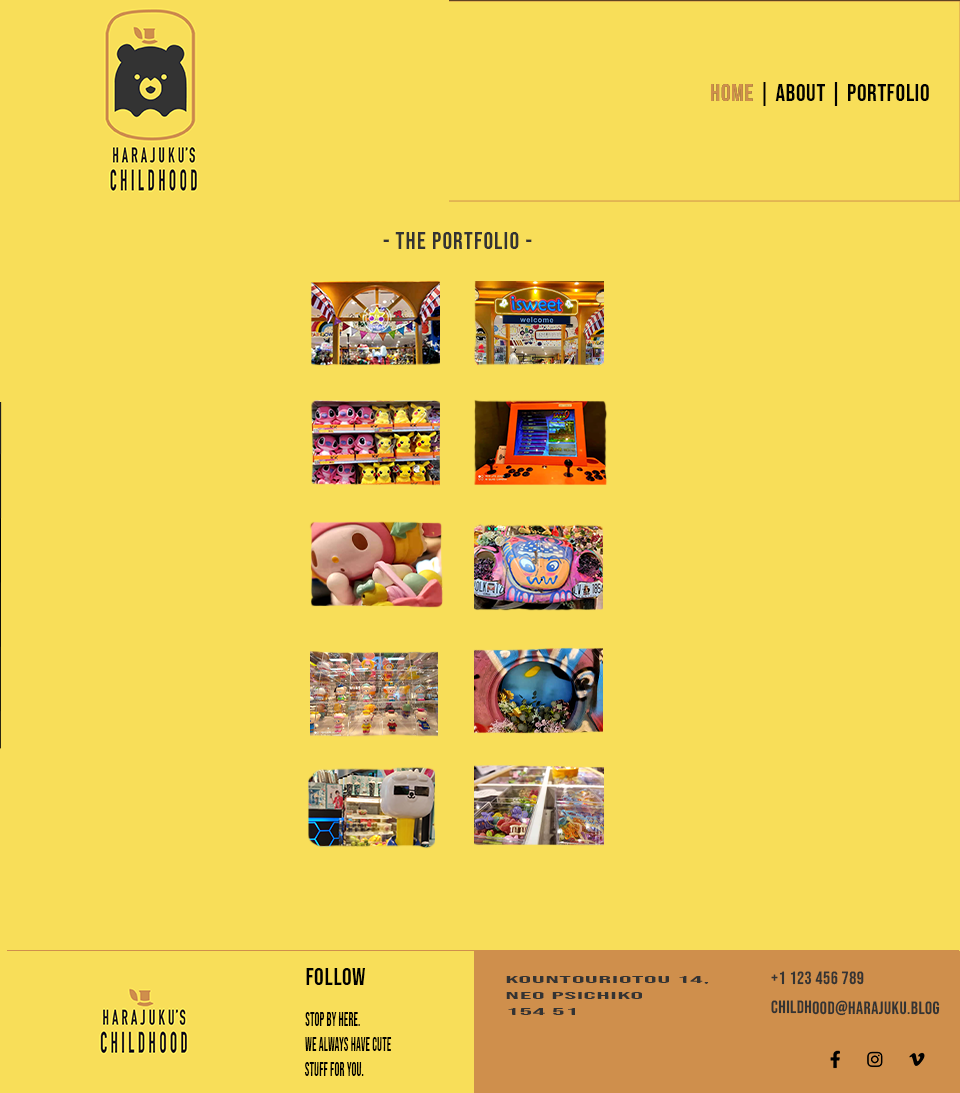
<style>
.page{position:relative;width:960px;height:1093px;background:#f8de59}
.page>*{position:absolute;margin:0}
.t1{font:24px "BebasNeue-Regular";letter-spacing:0.025em;color:#000000}
.t2{font:24px "BebasNeue-Regular";letter-spacing:0.025em;color:#cf8f4c}
.t3{font:24px "BebasNeue-Regular";letter-spacing:0.05em;color:#333333}
.t4{font:9.8px/16px "BebasNeue-Regular";letter-spacing:0.025em;color:#333333;scale:3.19 1}
.t5{font:18px/29.3px "BebasNeue-Regular";letter-spacing:0.025em;color:#333333}
.t6{font:18.9px/25.2px "BebasNeue-Regular";letter-spacing:0.025em;color:#000000;scale:0.62 1}
</style>
<div class="page">
<p class="t1" style="left:711px;top:82px;width:218px;height:24px">HOME | ABOUT | PORTFOLIO</p>
<p class="t2" style="left:711px;top:84px;width:42px;height:17px">HOME</p>
<p class="t3" style="left:383px;top:232px;width:149px;height:17px">- The Portfolio -</p>
<p class="t1" style="left:306px;top:968px;width:59px;height:17px">FOLLOW</p>
<p class="t4" style="left:506px;top:976px;width:203px;height:39px">Kountouriotou 14,<br>Neo Psichiko<br>154 51</p>
<p class="t5" style="left:771px;top:971px;width:169px;height:45px">+1 123 456 789<br>childhood@harajuku.blog</p>
<p class="t6" style="left:304px;top:1012px;width:88px;height:64px">stop by here. <br>we always have cute <br>stuff for you.</p>
</div>
